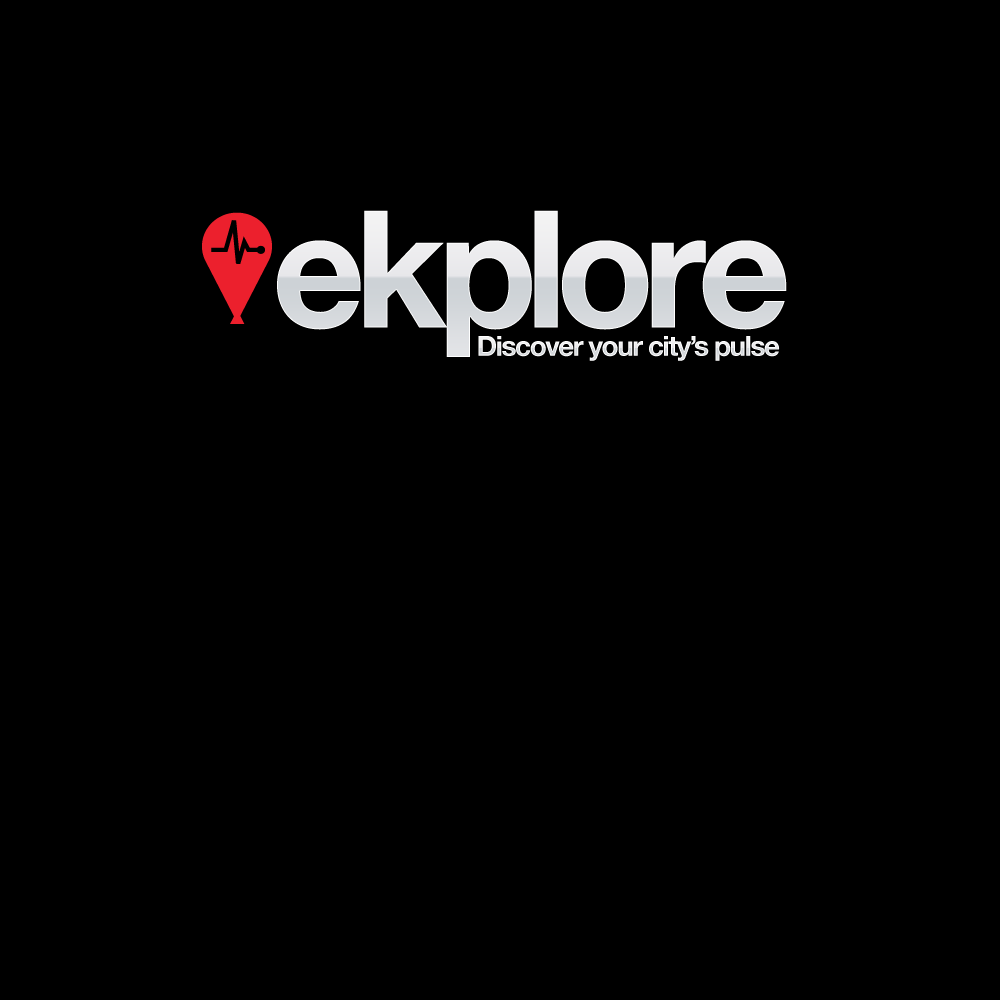
<style>
.page{position:relative;width:1000px;height:1000px;background:#000000}
.page>*{position:absolute;margin:0}
.t1{font:163.3px "HelveticaNeue-Bold";letter-spacing:-0.05em;color:#dcdfe2}
.t2{font:27.8px "HelveticaNeue-Bold";letter-spacing:-0.05em;color:#eeeef0}
</style>
<div class="page">
<p class="t1" style="left:277px;top:210px;width:510px;height:147px">ekplore</p>
<p class="t2" style="left:478px;top:336px;width:302px;height:25px">Discover your city’s pulse</p>
</div>
